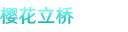
<style>
.page{position:relative;width:128px;height:32px;background:#ffffff}
.page>*{position:absolute;margin:0}
.t1{font:18.7px "HYWenHei-FEW";letter-spacing:0.025em}
</style>
<div class="page">
<p class="t1" style="left:0px;top:6px;width:74px;height:18px">樱花立桥</p>
</div>
